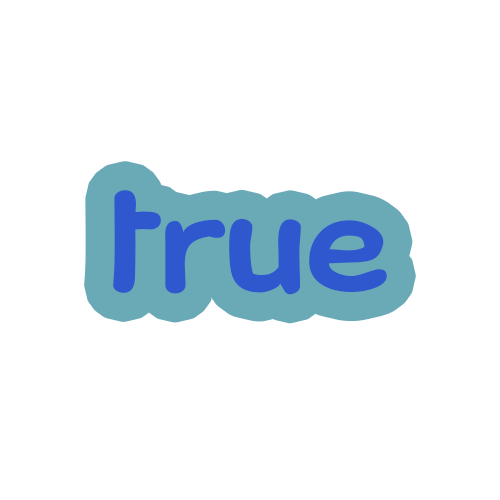
<style>
.page{position:relative;width:500px;height:500px;background:#ffffff}
.page>*{position:absolute;margin:0}
.t1{font:134.5px "Kronika";color:#2f58ce;scale:1.05 1}
</style>
<div class="page">
<p class="t1" style="left:113px;top:190px;width:274px;height:105px">true</p>
</div>
